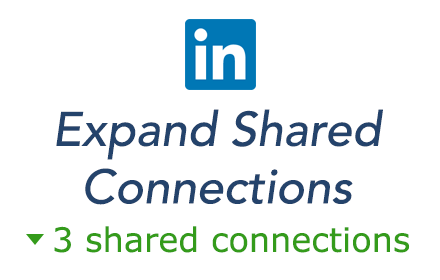
<style>
.page{position:relative;width:440px;height:280px;background:#ffffff}
.page>*{position:absolute;margin:0}
.t1{font:48px "Avenir-MediumOblique";color:#24436b}
.t2{font:33.6px "Verdana";color:#349b1b}
</style>
<div class="page">
<p class="t1" style="left:56px;top:109px;width:327px;height:96px;text-align:center">Expand Shared<br>Connections</p>
<p class="t2" style="left:54px;top:226px;width:356px;height:27px">3 shared connections</p>
</div>
